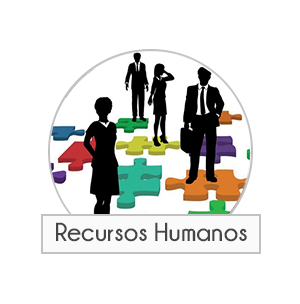
<style>
.page{position:relative;width:300px;height:304px;background:#ffffff}
.page>*{position:absolute;margin:0}
.t1{font:26px "Champagne&Limousines-Bold";color:#454545}
</style>
<div class="page">
<p class="t1" style="left:56px;top:222px;width:191px;height:20px">Recursos Humanos</p>
</div>
